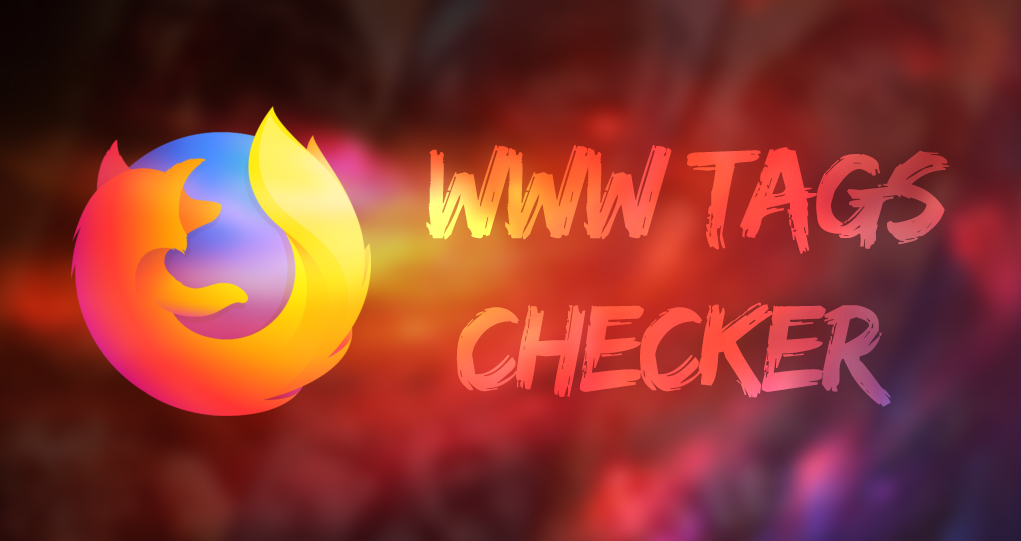
<style>
.page{position:relative;width:1021px;height:541px}
.page>*{position:absolute;margin:0}
.t1{font:128px "EdoSZ";letter-spacing:-0.04em;text-transform:uppercase}
</style>
<div class="page">
<p class="t1" style="left:426px;top:145px;width:524px;height:262px">WWW Tags<br> Checker</p>
</div>
